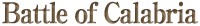
<style>
.page{position:relative;width:200px;height:26px;background:#ffffff}
.page>*{position:absolute;margin:0}
.t1{font:28px "RyuminPro-ExBold";letter-spacing:-0.08em;color:#6b573f;font-weight:bold;scale:0.9 1}
</style>
<div class="page">
<p class="t1" style="left:2px;top:1px;width:196px;height:23px">Battle of Calabria</p>
</div>
